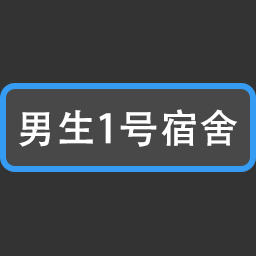
<style>
.page{position:relative;width:256px;height:256px;background:#333333}
.page>*{position:absolute;margin:0}
.t1{font:39px "AdobeHeitiStd-Regular";color:#ffffff;font-weight:bold}
</style>
<div class="page">
<p class="t1" style="left:19px;top:109px;width:218px;height:38px">男生1号宿舍</p>
</div>
